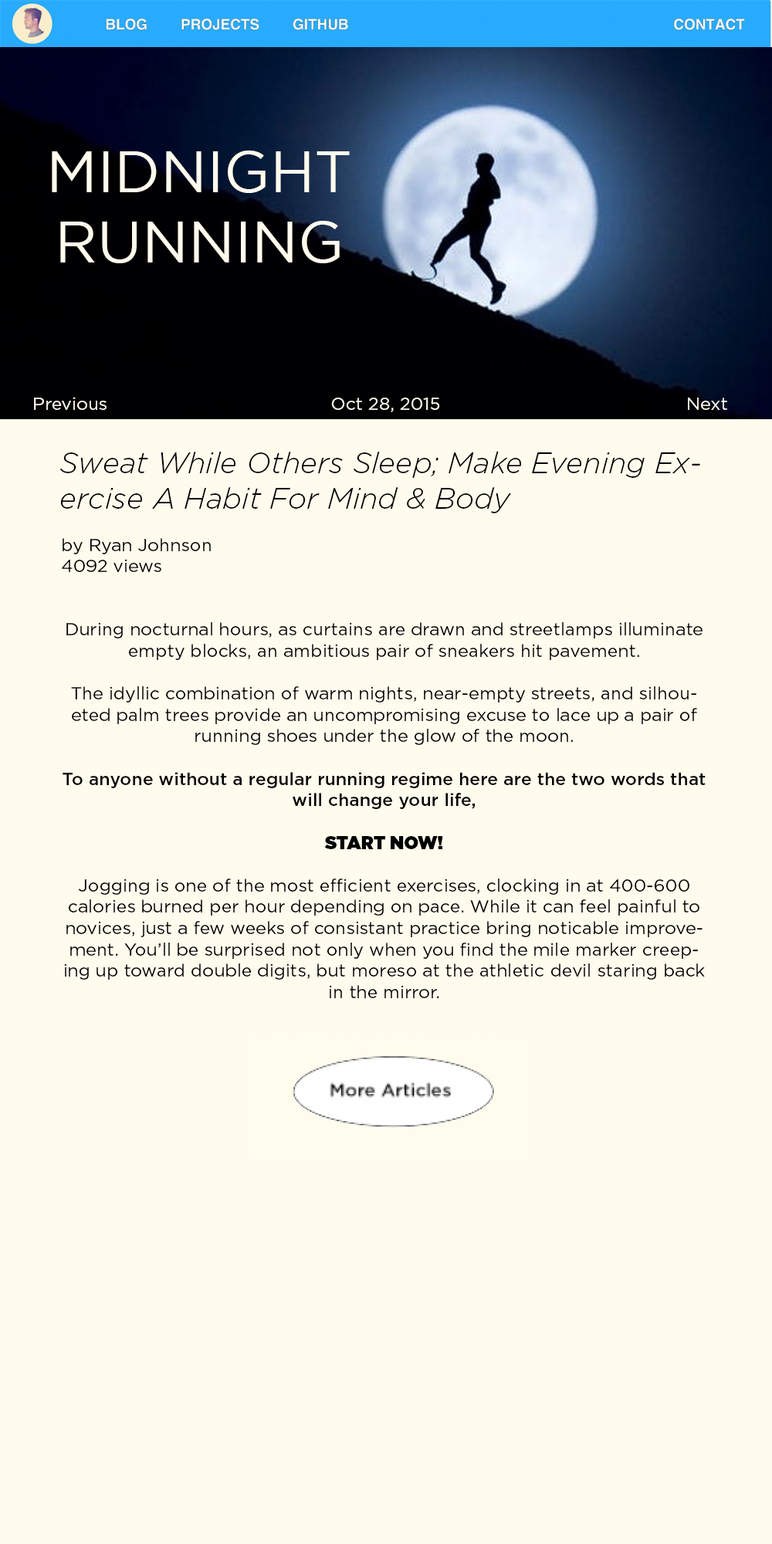
<style>
.page{position:relative;width:772px;height:1544px;background:#fffcee}
.page>*{position:absolute;margin:0}
.t1{font:58.7px "GothamBook";color:#fffcee}
.t2{font:17.8px "Gotham-Book";color:#fffcee}
.t3{font:29.3px "Gotham-LightItalic";color:#000000}
.t4{font:17.8px "Gotham-Book";color:#000000}
.t5{font:17.8px "Gotham-Medium";color:#000000}
.t6{font:17.8px "Gotham-Ultra";color:#000000}
</style>
<div class="page">
<p class="t1" style="left:52px;top:151px;width:298px;height:112px;text-align:center">MIDNIGHT RUNNING</p>
<p class="t2" style="left:34px;top:397px;width:73px;height:13px">Previous</p>
<p class="t2" style="left:331px;top:398px;width:109px;height:14px">Oct 28, 2015</p>
<p class="t2" style="left:688px;top:398px;width:39px;height:12px">Next</p>
<p class="t3" style="left:59px;top:451px;width:641px;height:62px">Sweat While Others Sleep; Make Evening Exercise A Habit For Mind &amp; Body</p>
<p class="t4" style="left:62px;top:538px;width:149px;height:34px">by Ryan Johnson<br>4092 views</p>
<p class="t4" style="left:63px;top:622px;width:643px;height:376px;text-align:center">During nocturnal hours, as curtains are drawn and streetlamps illuminate empty blocks, an ambitious pair of sneakers hit pavement.<br><br>The idyllic combination of warm nights, near-empty streets, and silhoueted palm trees provide an uncompromising excuse to lace up a pair of running shoes under the glow of the moon.<br><br><span class="t5">To anyone without a regular running regime here are the two words that will change your life,<br><br></span><span class="t6">START NOW!<br></span><br>Jogging is one of the most efficient exercises, clocking in at 400-600 calories burned per hour depending on pace. While it can feel painful to novices, just a few weeks of consistant practice bring noticable improvement. You’ll be surprised not only when you find the mile marker creeping up toward double digits, but moreso at the athletic devil staring back in the mirror.</p>
</div>
